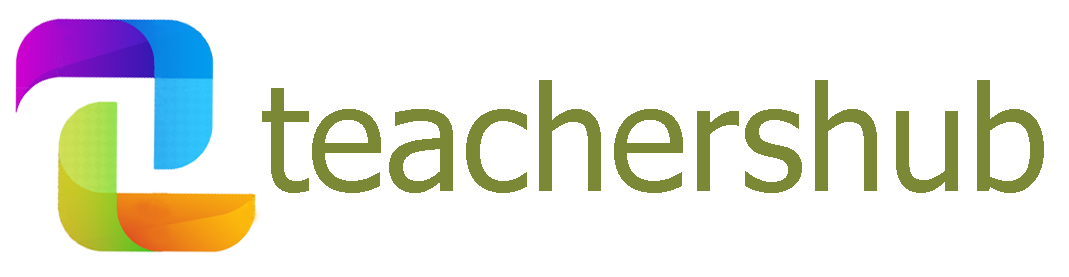
<style>
.page{position:relative;width:1069px;height:277px;background:#ffffff}
.page>*{position:absolute;margin:0}
.t1{font:145.8px "Tahoma";color:#7b8836}
</style>
<div class="page">
<p class="t1" style="left:262px;top:80px;width:782px;height:113px">teachershub</p>
</div>
